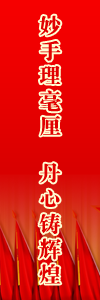
<style>
.page{position:relative;width:100px;height:300px}
.page>*{position:absolute;margin:0}
.t1{font:21.8px/20.5px "FZDBSJW--GB1-0";letter-spacing:0.16em;color:#e10000}
</style>
<div class="page">
<p class="t1" style="left:39px;top:15px;width:22px;height:269px">妙手理毫厘  丹心铸辉煌</p>
</div>
